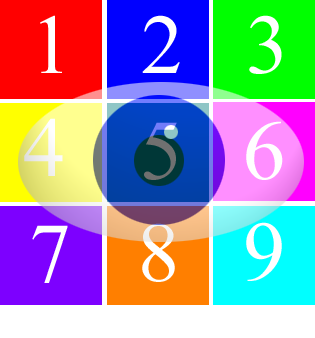
<style>
.page{position:relative;width:315px;height:338px}
.page>*{position:absolute;margin:0}
.t1{font:85px "TimesNewRomanPSMT";color:#ffffff}
.t2{font:85px "TimesNewRomanPSMT";color:#707070}
</style>
<div class="page">
<p class="t1" style="left:40px;top:15px;width:22px;height:58px">1</p>
<p class="t1" style="left:142px;top:15px;width:38px;height:58px">2</p>
<p class="t1" style="left:249px;top:15px;width:33px;height:59px">3</p>
<p class="t1" style="left:24px;top:118px;width:39px;height:58px">4</p>
<p class="t2" style="left:144px;top:122px;width:33px;height:58px">5</p>
<p class="t1" style="left:246px;top:121px;width:37px;height:59px">6</p>
<p class="t1" style="left:246px;top:222px;width:36px;height:59px">9</p>
<p class="t1" style="left:32px;top:225px;width:36px;height:58px">7</p>
<p class="t1" style="left:142px;top:223px;width:33px;height:59px">8</p>
</div>
